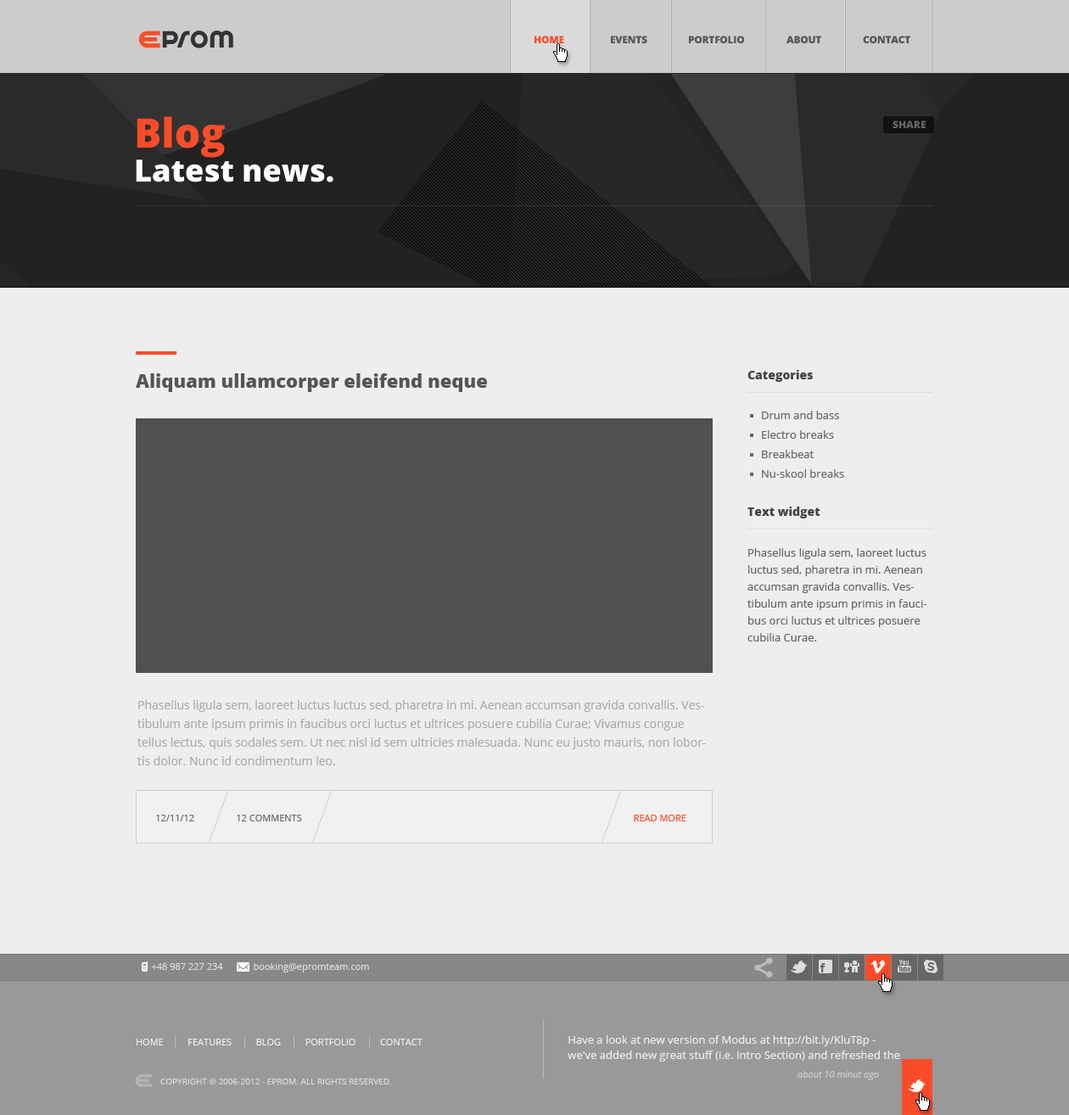
<style>
.page{position:relative;width:1069px;height:1115px;background:#eeeeee}
.page>*{position:absolute;margin:0}
.t1{font:26.1px "SpinCycleOT";letter-spacing:0.025em;color:#333333}
.t2{font:10.2px "OpenSans-Extrabold";letter-spacing:-0.025em;color:#fa4c29;text-transform:uppercase}
.t3{font:10.2px "OpenSans-Extrabold";letter-spacing:-0.025em;color:#555555;text-transform:uppercase}
.t4{font:40.7px "OpenSans-Extrabold";color:#fa4c29}
.t5{font:10.2px "OpenSans-Extrabold";color:#666666}
.t6{font:30.6px "OpenSans-Extrabold";color:#ffffff}
.t7{font:18.7px "OpenSans-Extrabold";color:#555555}
.t8{font:11.9px "OpenSans-Extrabold";color:#444444}
.t9{font:11px "OpenSans";color:#666666}
.t10{font:11px/17px "OpenSans";color:#666666}
.t11{font:11.9px/18.7px "OpenSans";color:#aaaaaa}
.t12{font:9.3px "OpenSans";color:#666666}
.t13{font:9.3px "OpenSans";color:#666666;text-transform:uppercase}
.t14{font:9.3px "OpenSans";color:#fa4c29;text-transform:uppercase}
.t15{font:9.3px "OpenSans";color:#dddddd}
.t16{font:11px/15.3px "OpenSans";color:#eeeeee}
.t17{font:9.3px "OpenSans";color:#eeeeee;text-transform:uppercase}
.t18{font:9.3px "OpenSans-Italic";color:#cccccc}
.t19{font:8.5px "OpenSans";color:#dddddd;text-transform:uppercase}
</style>
<div class="page">
<p class="t1" style="left:162px;top:31px;width:71px;height:17px">prom</p>
<p class="t2" style="left:535px;top:36px;width:29px;height:7px">Home</p>
<p class="t3" style="left:611px;top:36px;width:37px;height:7px">EVENTS</p>
<p class="t3" style="left:689px;top:36px;width:56px;height:7px">PORTFOLIO</p>
<p class="t3" style="left:787px;top:36px;width:35px;height:7px">ABOUT</p>
<p class="t3" style="left:863px;top:36px;width:48px;height:7px">Contact</p>
<p class="t4" style="left:137px;top:116px;width:88px;height:42px">Blog</p>
<p class="t5" style="left:893px;top:121px;width:33px;height:7px">SHARE</p>
<p class="t6" style="left:136px;top:160px;width:198px;height:22px">Latest news.</p>
<p class="t7" style="left:136px;top:373px;width:351px;height:19px">Aliquam ullamcorper eleifend neque</p>
<p class="t8" style="left:748px;top:370px;width:65px;height:12px">Categories</p>
<p class="t9" style="left:762px;top:411px;width:77px;height:8px">Drum and bass</p>
<p class="t9" style="left:762px;top:430px;width:72px;height:9px">Electro breaks</p>
<p class="t9" style="left:762px;top:450px;width:52px;height:8px">Breakbeat</p>
<p class="t9" style="left:762px;top:469px;width:82px;height:9px">Nu-skool breaks</p>
<p class="t8" style="left:748px;top:507px;width:73px;height:12px">Text widget</p>
<p class="t10" style="left:748px;top:548px;width:179px;height:94px">Phasellus ligula sem, laoreet luctus luctus sed, pharetra in mi. Aenean accumsan gravida convallis. Vestibulum ante ipsum primis in faucibus orci luctus et ultrices posuere cubilia Curae.</p>
<p class="t11" style="left:137px;top:700px;width:569px;height:65px">Phasellus ligula sem, laoreet luctus luctus sed, pharetra in mi. Aenean accumsan gravida convallis. Vestibulum ante ipsum primis in faucibus orci luctus et ultrices posuere cubilia Curae; Vivamus congue tellus lectus, quis sodales sem. Ut nec nisl id sem ultricies malesuada. Nunc eu justo mauris, non lobortis dolor. Nunc id condimentum leo.</p>
<p class="t12" style="left:156px;top:815px;width:38px;height:7px">12/11/12</p>
<p class="t13" style="left:237px;top:815px;width:65px;height:7px">12 Comments</p>
<p class="t14" style="left:634px;top:815px;width:53px;height:7px">Read more</p>
<p class="t15" style="left:151px;top:963px;width:72px;height:7px">+48 987 227 234</p>
<p class="t15" style="left:254px;top:963px;width:115px;height:10px">booking@epromteam.com</p>
<p class="t16" style="left:568px;top:1035px;width:332px;height:27px">Have a look at new version of Modus at http://bit.ly/KluT8p - we've added new great stuff (i.e. Intro Section) and refreshed the theme!</p>
<p class="t17" style="left:137px;top:1039px;width:286px;height:7px">Home          Features          Blog          Portfolio          Contact</p>
<p class="t18" style="left:798px;top:1071px;width:81px;height:9px">about 10 minut ago</p>
<p class="t19" style="left:160px;top:1079px;width:231px;height:6px">Copyright © 2006-2012 - EPROM. All rights reserved.</p>
</div>
